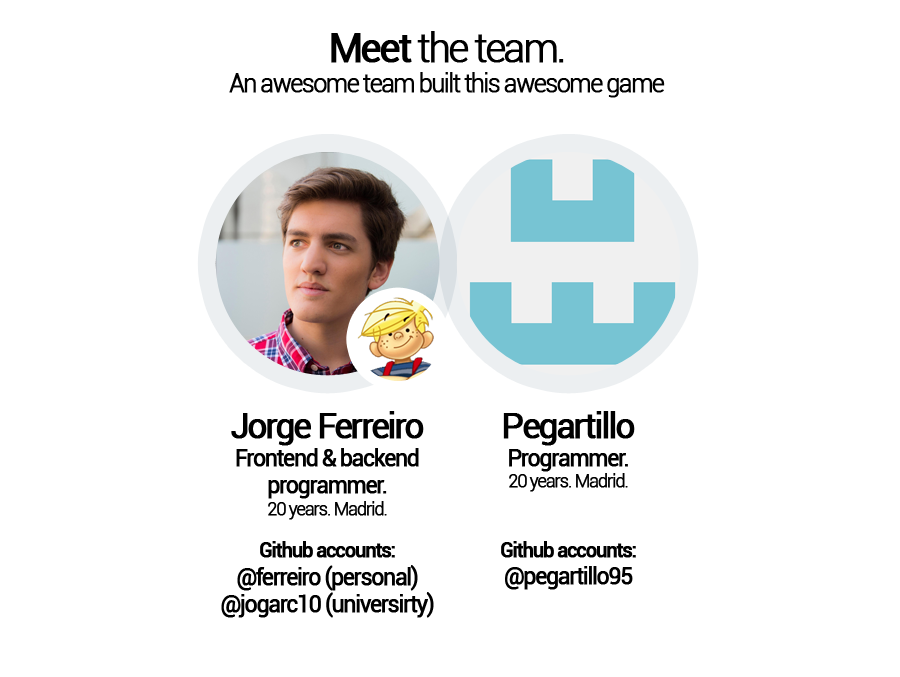
<style>
.page{position:relative;width:900px;height:677px;background:#ffffff}
.page>*{position:absolute;margin:0}
.t1{font:25px "Roboto-Light";letter-spacing:-0.08em;color:#000000;font-weight:bold}
.t2{font:40px "Roboto-Regular";letter-spacing:-0.08em;color:#000000;font-weight:bold}
.t3{font:40px "Roboto-Light";letter-spacing:-0.08em;color:#000000;font-weight:bold}
.t4{font:23px "Roboto-Regular";letter-spacing:-0.08em;color:#000000;font-weight:bold}
.t5{font:35px "Roboto-Regular";letter-spacing:-0.08em;color:#000000;font-weight:bold}
.t6{font:18px "Roboto-Light";letter-spacing:-0.08em;color:#000000;font-weight:bold}
.t7{font:20px "Roboto-Medium";letter-spacing:-0.08em;color:#000000;font-weight:bold}
</style>
<div class="page">
<p class="t1" style="left:229px;top:31px;width:436px;height:67px;text-align:center"><span class="t2">Meet </span><span class="t3">the team.<br></span>An awesome team built this awesome game</p>
<p class="t4" style="left:221px;top:411px;width:213px;height:207px;text-align:center"><span class="t5">Jorge Ferreiro<br></span>Frontend &amp; backend programmer.<br><span class="t6">20 years. Madrid.<br><br></span><span class="t7">Github accounts:<br></span>@ferreiro (personal)<br>@jogarc10 (universirty)</p>
<p class="t6" style="left:503px;top:411px;width:132px;height:81px;text-align:center"><span class="t5">Pegartillo<br></span><span class="t4">Programmer.<br></span>20 years. Madrid.</p>
<p class="t7" style="left:501px;top:541px;width:135px;height:49px;text-align:center">Github accounts:<br><span class="t4">@pegartillo95</span></p>
</div>
